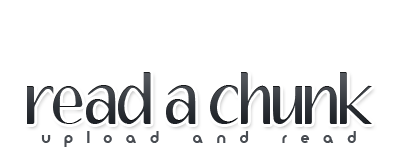
<style>
.page{position:relative;width:402px;height:154px;background:#ffffff}
.page>*{position:absolute;margin:0}
.t1{font:60px "Aubrey";color:#252a31}
.t2{font:15px "Moderna";letter-spacing:0.9em;color:#484c52}
</style>
<div class="page">
<p class="t1" style="left:27px;top:72px;width:345px;height:52px">read a chunk</p>
<p class="t2" style="left:41px;top:131px;width:315px;height:16px">upload and read</p>
</div>
